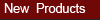
<style>
.page{position:relative;width:100px;height:20px;background:#710808}
.page>*{position:absolute;margin:0}
.t1{font:12.5px "ArialMT";color:#ffffff}
</style>
<div class="page">
<p class="t1" style="left:4px;top:3px;width:82px;height:10px">New  Products</p>
</div>
